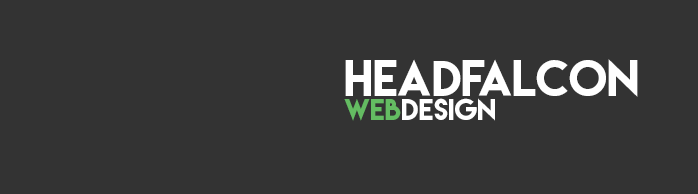
<style>
.page{position:relative;width:698px;height:194px;background:#333333}
.page>*{position:absolute;margin:0}
.t1{font:45px "LemonMilk";color:#ffffff}
.t2{font:26.8px "LemonMilk";color:#ffffff}
.t3{font:26.8px "LemonMilk";color:#64bc62}
</style>
<div class="page">
<p class="t1" style="left:345px;top:59px;width:293px;height:38px">HEADFALCON</p>
<p class="t2" style="left:344px;top:98px;width:151px;height:23px"><span class="t3">web</span>design</p>
</div>
